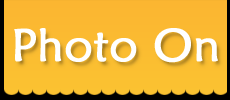
<style>
.page{position:relative;width:230px;height:100px}
.page>*{position:absolute;margin:0}
.t1{font:46px "MaiandraGD-Regular";color:#ffffff;font-weight:bold}
</style>
<div class="page">
<p class="t1" style="left:14px;top:28px;width:204px;height:35px">Photo On</p>
</div>
